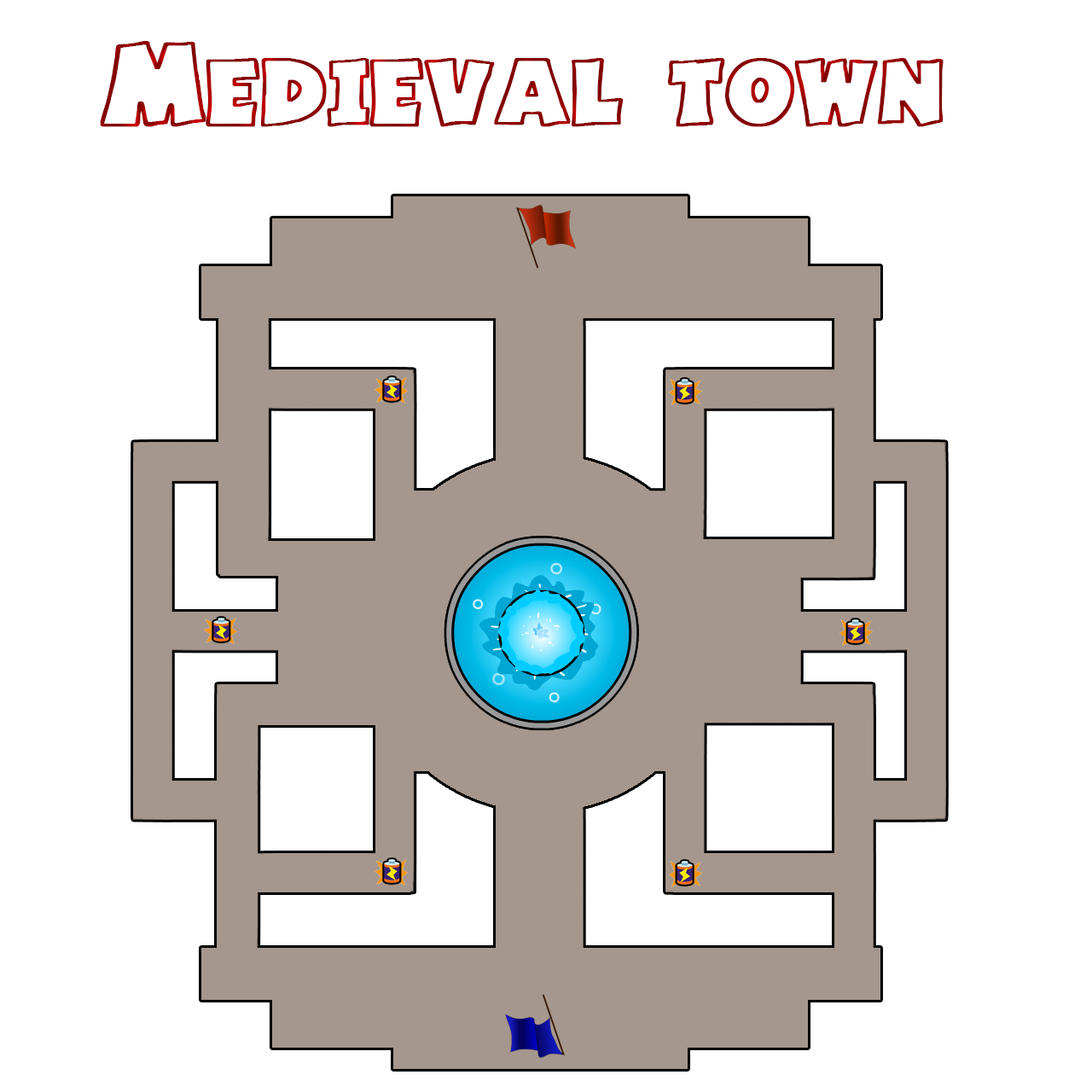
<style>
.page{position:relative;width:1092px;height:1092px;background:#ffffff}
.page>*{position:absolute;margin:0}
.t1{font:85.3px "BasicFont";color:#8f0000;font-weight:bold}
</style>
<div class="page">
<p class="t1" style="left:100px;top:41px;width:844px;height:86px">Medieval town</p>
</div>
